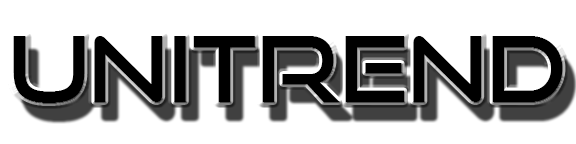
<style>
.page{position:relative;width:576px;height:144px;background:#ffffff}
.page>*{position:absolute;margin:0}
.t1{font:90px "GoodTimesRg-Regular";color:#000000}
</style>
<div class="page">
<p class="t1" style="left:13px;top:36px;width:550px;height:67px">Unitrend</p>
</div>
